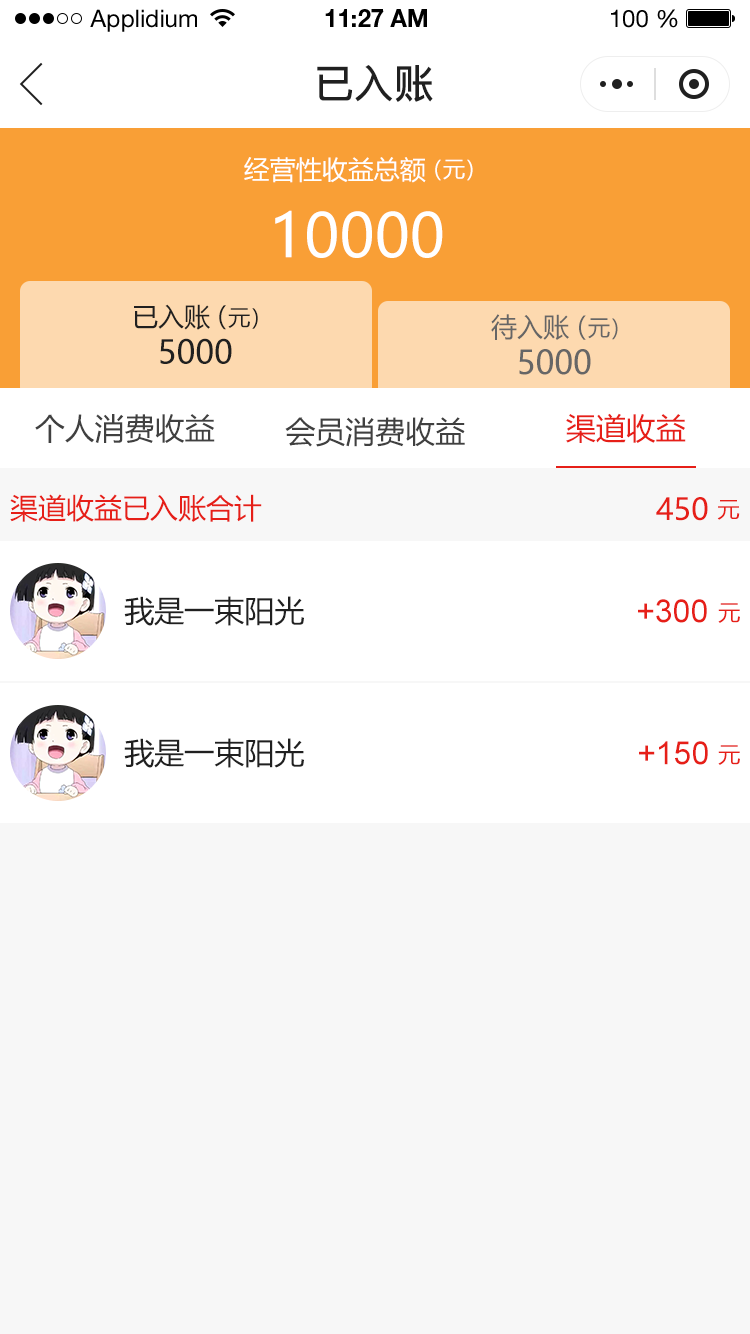
<style>
.page{position:relative;width:750px;height:1334px;background:#f7f7f7}
.page>*{position:absolute;margin:0}
.t1{font:24px "HelveticaNeueLTStd-Roman";color:#000000}
.t2{font:24px "HelveticaNeueLTStd-Bd";color:#000000}
.t3{font:40px "PingFang-SC-Bold";color:#202020;text-transform:uppercase}
.t4{font:26px "MicrosoftYaHei";color:#ffffff;text-transform:uppercase}
.t5{font:22px "MicrosoftYaHei";color:#ffffff;text-transform:uppercase}
.t6{font:60px "MicrosoftYaHei";color:#ffffff;text-transform:uppercase}
.t7{font:26px "MicrosoftYaHei";color:#202020;text-transform:uppercase}
.t8{font:22px "MicrosoftYaHei";color:#202020;text-transform:uppercase}
.t9{font:26.2px "MicrosoftYaHei";color:#666666;text-transform:uppercase}
.t10{font:22.2px "MicrosoftYaHei";color:#666666;text-transform:uppercase}
.t11{font:32px "MicrosoftYaHei";color:#202020;text-transform:uppercase}
.t12{font:32.2px "MicrosoftYaHei";color:#666666;text-transform:uppercase}
.t13{font:30px "MicrosoftYaHei";color:#404040;text-transform:uppercase}
.t14{font:30px "MicrosoftYaHei";color:#e61f18;text-transform:uppercase}
.t15{font:28px "MicrosoftYaHei";color:#e61f18;text-transform:uppercase}
.t16{font:22px "MicrosoftYaHei";color:#e61f18;text-transform:uppercase}
.t17{font:30px "MicrosoftYaHei";color:#202020;text-transform:uppercase}
.t18{font:32px "ArialMT";color:#e61f18;text-transform:uppercase}
</style>
<div class="page">
<p class="t1" style="left:90px;top:9px;width:107px;height:23px">Applidium</p>
<p class="t2" style="left:325px;top:9px;width:102px;height:18px">11:27 AM</p>
<p class="t1" style="left:611px;top:9px;width:67px;height:19px">100 %</p>
<p class="t3" style="left:317px;top:65px;width:116px;height:37px">已入账</p>
<p class="t4" style="left:244px;top:157px;width:182px;height:26px">经营性收益总额</p>
<p class="t5" style="left:435px;top:159px;width:38px;height:22px">（元）</p>
<p class="t6" style="left:275px;top:210px;width:168px;height:48px">10000</p>
<p class="t7" style="left:134px;top:304px;width:76px;height:26px">已入账</p>
<p class="t8" style="left:219px;top:305px;width:39px;height:25px"><span class="t7">（</span>元）</p>
<p class="t9" style="left:491px;top:314px;width:78px;height:26px">待入账</p>
<p class="t10" style="left:579px;top:315px;width:39px;height:25px"><span class="t9">（</span>元）</p>
<p class="t11" style="left:160px;top:338px;width:72px;height:26px">5000</p>
<p class="t12" style="left:519px;top:349px;width:72px;height:26px">5000</p>
<p class="t13" style="left:35px;top:414px;width:180px;height:29px">个人消费收益</p>
<p class="t14" style="left:566px;top:413px;width:120px;height:30px">渠道收益</p>
<p class="t13" style="left:285px;top:417px;width:180px;height:30px">会员消费收益</p>
<p class="t15" style="left:10px;top:494px;width:252px;height:28px">渠道收益已入账合计</p>
<p class="t14" style="left:656px;top:497px;width:52px;height:24px">450</p>
<p class="t16" style="left:717px;top:500px;width:23px;height:20px">元</p>
<p class="t17" style="left:124px;top:596px;width:180px;height:30px">我是一束阳光</p>
<p class="t18" style="left:638px;top:599px;width:69px;height:24px">+300</p>
<p class="t16" style="left:718px;top:603px;width:22px;height:20px">元</p>
<p class="t17" style="left:124px;top:738px;width:180px;height:30px">我是一束阳光</p>
<p class="t18" style="left:639px;top:741px;width:69px;height:24px">+150</p>
<p class="t16" style="left:718px;top:745px;width:22px;height:20px">元</p>
</div>
